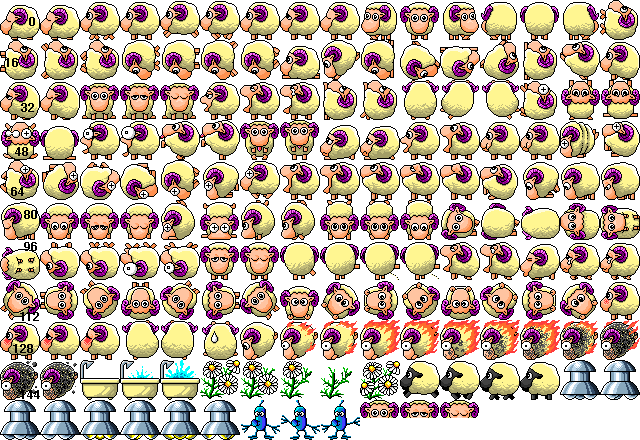
<style>
.page{position:relative;width:640px;height:440px;background:#ffffff}
.page>*{position:absolute;margin:0}
.t1{font:12px "Helvetica-Bold";color:#000000}
</style>
<div class="page">
<p class="t1" style="left:29px;top:17px;width:6px;height:9px">0</p>
<p class="t1" style="left:5px;top:58px;width:13px;height:9px">16</p>
<p class="t1" style="left:21px;top:103px;width:13px;height:9px">32</p>
<p class="t1" style="left:15px;top:147px;width:13px;height:9px">48</p>
<p class="t1" style="left:11px;top:187px;width:13px;height:9px">64</p>
<p class="t1" style="left:24px;top:210px;width:13px;height:9px">80</p>
<p class="t1" style="left:24px;top:242px;width:13px;height:9px">96</p>
<p class="t1" style="left:20px;top:312px;width:19px;height:9px">112</p>
<p class="t1" style="left:13px;top:344px;width:20px;height:9px">128</p>
<p class="t1" style="left:20px;top:390px;width:20px;height:9px">144</p>
</div>
